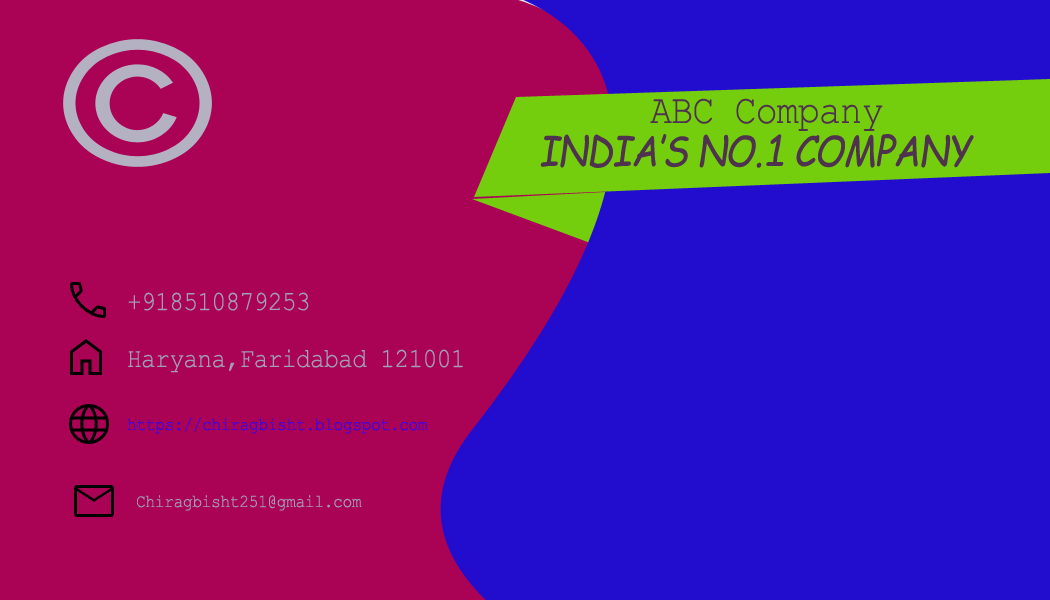
<style>
.page{position:relative;width:1050px;height:600px;background:#aa0255}
.page>*{position:absolute;margin:0}
.t1{font:41.2px "CourierNewPSMT";letter-spacing:-0.025em;color:#4e324e;scale:0.89 1}
.t2{font:41.2px "ComicSansMS-Italic";letter-spacing:-0.025em;color:#4e324e;scale:0.89 1}
.t3{font:27.5px "CourierNewPSMT";letter-spacing:-0.025em;color:#a19eb5;scale:0.89 1}
.t4{font:18.3px "CourierNewPSMT";letter-spacing:-0.025em;color:#3c00e6;scale:0.89 1}
.t5{font:18.3px "CourierNewPSMT";letter-spacing:-0.025em;color:#a19eb5;scale:0.89 1}
</style>
<div class="page">
<p class="t1" style="left:650px;top:98px;width:233px;height:33px">ABC Company</p>
<p class="t2" style="left:540px;top:133px;width:434px;height:35px">INDIA’S NO.1 COMPANY</p>
<p class="t3" style="left:128px;top:292px;width:181px;height:19px">+918510879253</p>
<p class="t3" style="left:128px;top:349px;width:335px;height:24px">Haryana,Faridabad 121001</p>
<p class="t4" style="left:127px;top:417px;width:301px;height:17px">https://chiragbisht.blogspot.com</p>
<p class="t5" style="left:137px;top:495px;width:225px;height:16px">Chiragbisht251@gmail.com</p>
</div>
